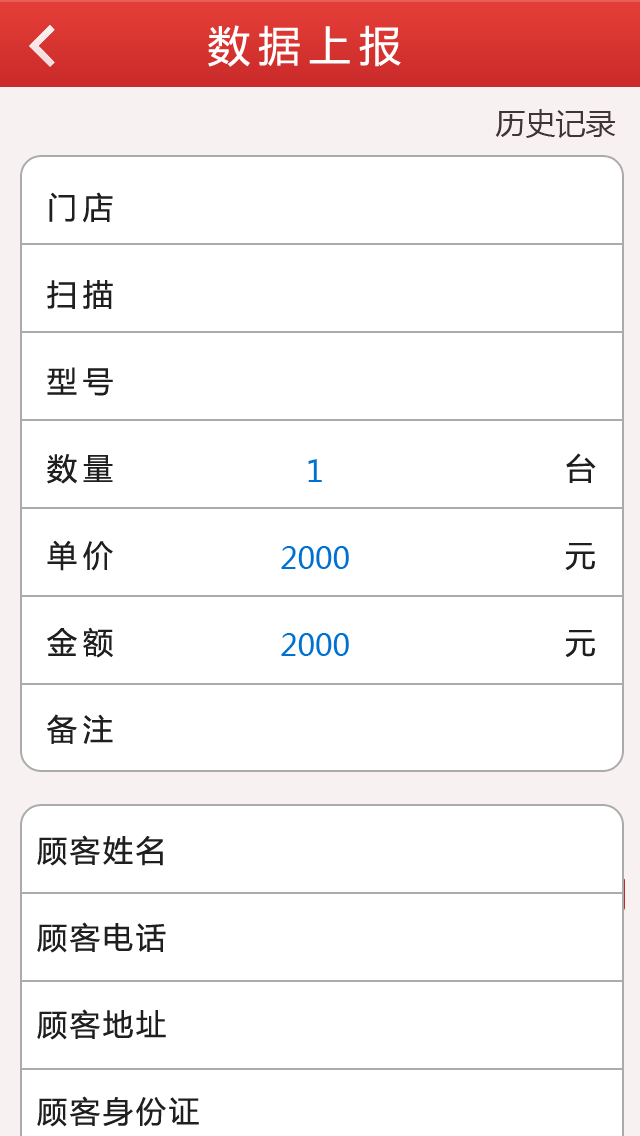
<style>
.page{position:relative;width:640px;height:1136px;background:#ffffff}
.page>*{position:absolute;margin:0}
.t1{font:42px "MicrosoftYaHei";letter-spacing:0.2em;color:#ffffff}
.t2{font:30px "MicrosoftYaHei";color:#3e3536}
.t3{font:30px/87px "MicrosoftYaHei";letter-spacing:0.2em;color:#1f1f1f}
.t4{font:30px/87px "MicrosoftYaHei";color:#0071d1}
.t5{font:30px/87px "MicrosoftYaHei";letter-spacing:0.1em;color:#1f1f1f}
</style>
<div class="page">
<p class="t1" style="left:208px;top:25px;width:193px;height:42px">数据上报</p>
<p class="t2" style="left:495px;top:109px;width:121px;height:29px">历史记录</p>
<p class="t3" style="left:47px;top:192px;width:549px;height:552px">门店<br>扫描<br>型号<br>数量                              台<br>单价                              元<br>金额                              元<br>备注</p>
<p class="t4" style="left:281px;top:459px;width:68px;height:197px;text-align:center">1<br>2000<br>2000</p>
<p class="t5" style="left:37px;top:835px;width:162px;height:292px">顾客姓名<br>顾客电话<br>顾客地址<br>顾客身份证</p>
</div>
